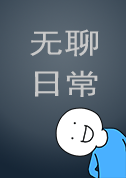
<style>
.page{position:relative;width:126px;height:178px}
.page>*{position:absolute;margin:0}
.t1{font:28.8px/41px "SimHei";color:#c9c9c9;scale:1.25 1}
</style>
<div class="page">
<p class="t1" style="left:30px;top:29px;width:69px;height:68px;text-align:center">无聊<br>日常</p>
</div>
